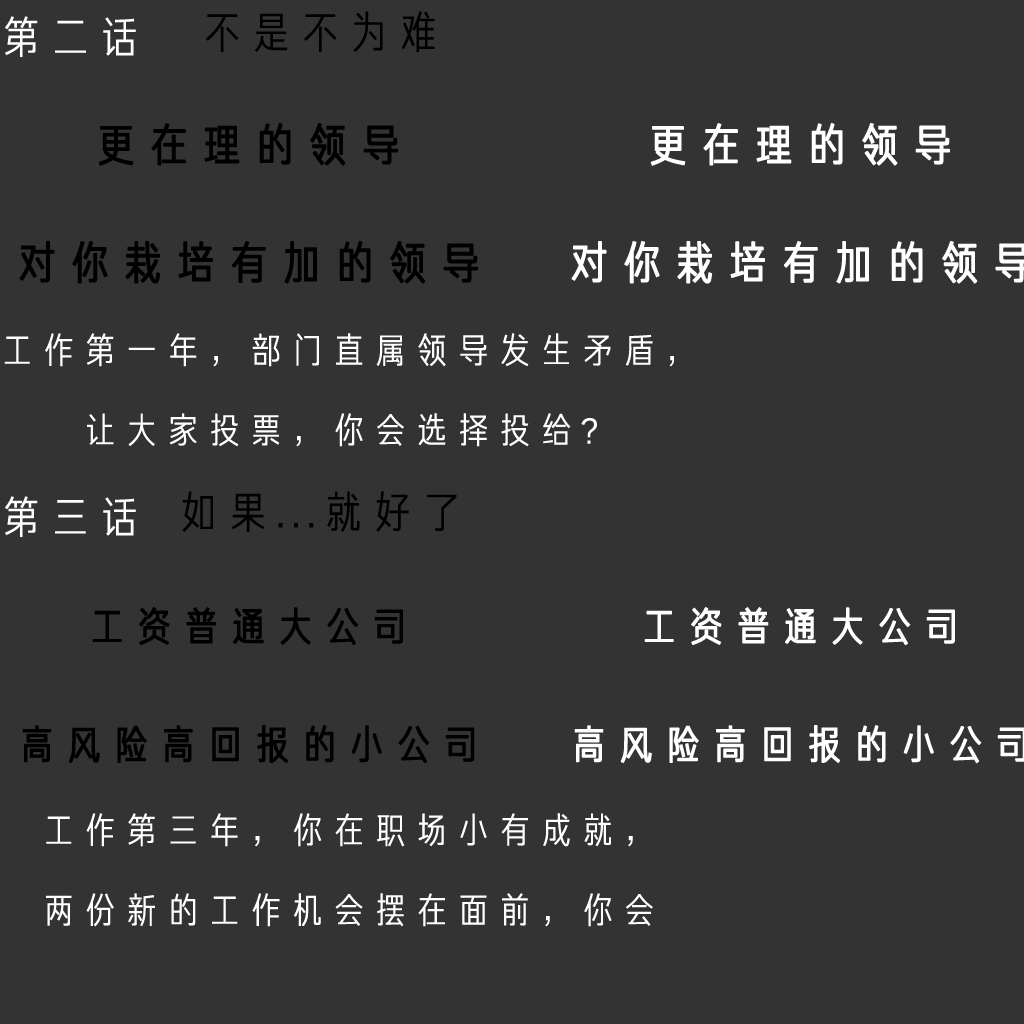
<style>
.page{position:relative;width:1024px;height:1024px;background:#333333}
.page>*{position:absolute;margin:0}
.t1{font:44.4px "FZJHJW--GB1-0";letter-spacing:0.123em;color:#ffffff}
.t2{font:44.4px "FZJHJW--GB1-0";letter-spacing:0.123em;color:#000000}
.t3{font:45.2px "FZJHJW--GB1-0";letter-spacing:0.151em;color:#000000;font-weight:bold}
.t4{font:45.2px "FZJHJW--GB1-0";letter-spacing:0.151em;color:#ffffff;font-weight:bold}
.t5{font:36px/80px "FZJHJW--GB1-0";letter-spacing:0.152em;color:#ffffff}
.t6{font:40.2px "FZJHJW--GB1-0";letter-spacing:0.151em;color:#000000;font-weight:bold}
.t7{font:40.2px "FZJHJW--GB1-0";letter-spacing:0.151em;color:#ffffff;font-weight:bold}
</style>
<div class="page">
<p class="t1" style="left:5px;top:16px;width:131px;height:41px">第二话</p>
<p class="t2" style="left:206px;top:11px;width:229px;height:41px">不是不为难</p>
<p class="t3" style="left:98px;top:123px;width:300px;height:43px">更在理的领导</p>
<p class="t4" style="left:650px;top:123px;width:300px;height:43px">更在理的领导</p>
<p class="t3" style="left:19px;top:241px;width:459px;height:43px">对你栽培有加的领导</p>
<p class="t5" style="left:4px;top:333px;width:670px;height:114px;text-align:center">工作第一年，部门直属领导发生矛盾，<br>让大家投票，你会选择投给？</p>
<p class="t1" style="left:5px;top:496px;width:131px;height:41px">第三话</p>
<p class="t2" style="left:182px;top:491px;width:275px;height:41px">如果...就好了</p>
<p class="t6" style="left:92px;top:607px;width:311px;height:39px">工资普通大公司</p>
<p class="t7" style="left:644px;top:607px;width:311px;height:39px">工资普通大公司</p>
<p class="t6" style="left:22px;top:725px;width:453px;height:39px">高风险高回报的小公司</p>
<p class="t5" style="left:46px;top:813px;width:607px;height:114px;text-align:center">工作第三年，你在职场小有成就，<br>两份新的工作机会摆在面前，你会</p>
</div>
